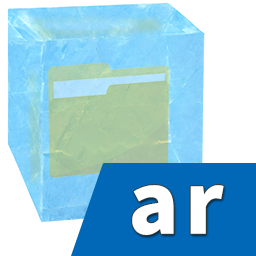
<style>
.page{position:relative;width:256px;height:256px;background:#ffffff}
.page>*{position:absolute;margin:0}
.t1{font:83px "MochiyPop-Regular";letter-spacing:0.075em;color:#ffffff}
</style>
<div class="page">
<p class="t1" style="left:132px;top:185px;width:92px;height:50px">ar</p>
</div>
